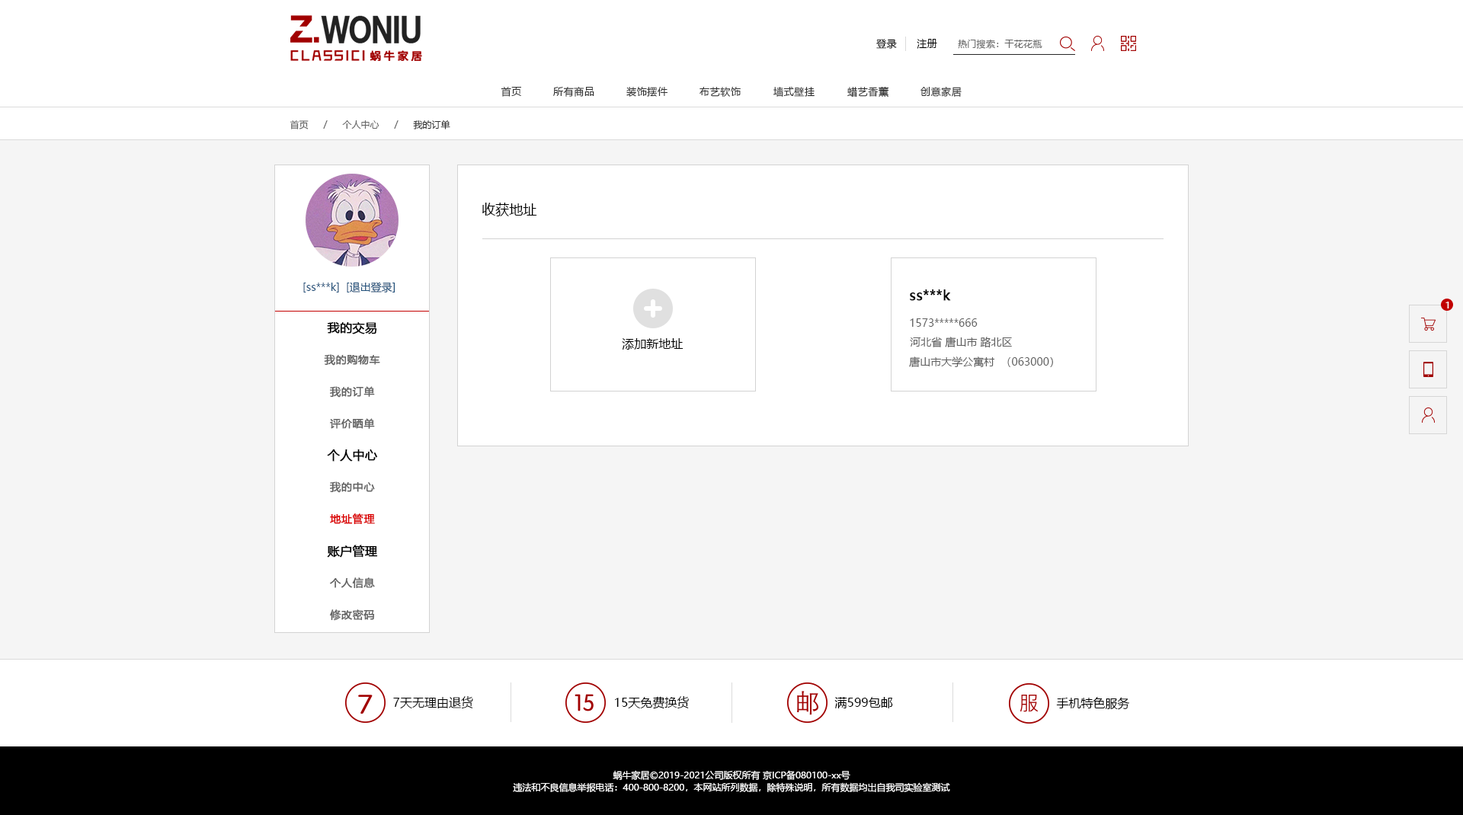
<style>
.page{position:relative;width:1463px;height:815px;background:#ffffff}
.page>*{position:absolute;margin:0}
.t1{font:9.9px "MicrosoftYaHei";letter-spacing:0.05em;color:#000000}
.t2{font:9.1px "MicrosoftYaHei";letter-spacing:0.025em;color:#686868}
.t3{font:9.9px "MicrosoftYaHei";letter-spacing:0.05em;color:#333333}
.t4{font:9.1px "MicrosoftYaHei";color:#666666}
.t5{font:9.1px "MicrosoftYaHei";color:#333333}
.t6{font:13.7px "MicrosoftYaHei";color:#000000}
.t7{font:10.7px "MicrosoftYaHei";color:#23527c}
.t8{font:13.7px "MicrosoftYaHei";color:#000000;font-weight:bold}
.t9{font:9.1px "MicrosoftYaHei";letter-spacing:0.025em;color:#ffffff}
.t10{font:12.2px "MicrosoftYaHei";color:#000000;font-weight:bold}
.t11{font:10.7px "MicrosoftYaHei";color:#5f5f5f}
.t12{font:12.2px "MicrosoftYaHei";color:#000000}
.t13{font:10.7px "MicrosoftYaHei";letter-spacing:0.025em;color:#626262;font-weight:bold}
.t14{font:10.7px "MicrosoftYaHei";letter-spacing:0.025em;color:#db0000;font-weight:bold}
.t15{font:9.1px/12.2px "MicrosoftYaHei";color:#ffffff}
</style>
<div class="page">
<p class="t1" style="left:876px;top:39px;width:21px;height:10px">登录</p>
<p class="t1" style="left:917px;top:39px;width:20px;height:10px">注册</p>
<p class="t2" style="left:958px;top:39px;width:84px;height:10px">热门搜索：干花花瓶</p>
<p class="t3" style="left:501px;top:87px;width:20px;height:10px">首页</p>
<p class="t3" style="left:553px;top:87px;width:41px;height:10px">所有商品</p>
<p class="t3" style="left:626px;top:87px;width:41px;height:10px">装饰摆件</p>
<p class="t3" style="left:699px;top:87px;width:42px;height:10px">布艺软饰</p>
<p class="t3" style="left:773px;top:87px;width:41px;height:10px">墙式壁挂</p>
<p class="t3" style="left:847px;top:86px;width:42px;height:12px">蜡艺香薰</p>
<p class="t3" style="left:920px;top:87px;width:41px;height:10px">创意家居</p>
<p class="t4" style="left:290px;top:120px;width:19px;height:10px">首页</p>
<p class="t4" style="left:323px;top:120px;width:5px;height:9px">/</p>
<p class="t4" style="left:342px;top:120px;width:37px;height:9px">个人中心</p>
<p class="t4" style="left:394px;top:120px;width:4px;height:9px">/</p>
<p class="t5" style="left:413px;top:120px;width:37px;height:10px">我的订单</p>
<p class="t6" style="left:482px;top:203px;width:55px;height:13px">收获地址</p>
<p class="t7" style="left:347px;top:282px;width:48px;height:11px">[退出登录]</p>
<p class="t7" style="left:303px;top:283px;width:36px;height:10px">[ss***k]</p>
<p class="t8" style="left:910px;top:290px;width:41px;height:11px">ss***k</p>
<p class="t9" style="left:1445px;top:302px;width:4px;height:7px">1</p>
<p class="t10" style="left:327px;top:322px;width:50px;height:12px">我的交易</p>
<p class="t11" style="left:910px;top:318px;width:67px;height:9px">1573*****666</p>
<p class="t12" style="left:622px;top:338px;width:61px;height:12px">添加新地址</p>
<p class="t11" style="left:910px;top:337px;width:102px;height:11px">河北省 唐山市 路北区</p>
<p class="t13" style="left:324px;top:354px;width:56px;height:12px">我的购物车</p>
<p class="t11" style="left:909px;top:357px;width:144px;height:10px">唐山市大学公寓村  （063000）</p>
<p class="t13" style="left:330px;top:386px;width:45px;height:12px">我的订单</p>
<p class="t13" style="left:330px;top:418px;width:45px;height:11px">评价晒单</p>
<p class="t10" style="left:327px;top:449px;width:51px;height:13px">个人中心</p>
<p class="t13" style="left:330px;top:481px;width:45px;height:12px">我的中心</p>
<p class="t14" style="left:330px;top:513px;width:45px;height:12px">地址管理</p>
<p class="t10" style="left:327px;top:545px;width:51px;height:13px">账户管理</p>
<p class="t13" style="left:330px;top:577px;width:45px;height:12px">个人信息</p>
<p class="t13" style="left:330px;top:609px;width:45px;height:12px">修改密码</p>
<p class="t12" style="left:393px;top:696px;width:80px;height:13px">7天无理由退货</p>
<p class="t12" style="left:615px;top:696px;width:74px;height:13px">15天免费换货</p>
<p class="t12" style="left:834px;top:697px;width:59px;height:12px">满599包邮</p>
<p class="t12" style="left:1056px;top:697px;width:74px;height:13px">手机特色服务</p>
<p class="t15" style="left:513px;top:770px;width:437px;height:22px;text-align:center">蜗牛家居©2019-2021公司版权所有 京ICP备080100-xx号<br>违法和不良信息举报电话：400-800-8200，本网站所列数据，除特殊说明，所有数据均出自我司实验室测试</p>
</div>
